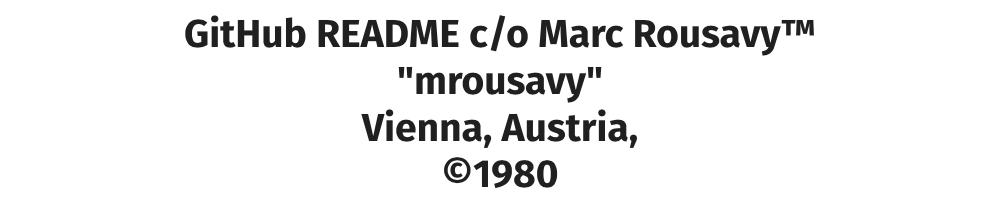
<style>
.page{position:relative;width:1000px;height:200px;background:#ffffff}
.page>*{position:absolute;margin:0}
.t1{font:39px "FiraSans-Bold";color:#202020}
</style>
<div class="page">
<p class="t1" style="left:185px;top:15px;width:629px;height:174px;text-align:center">GitHub README c/o Marc Rousavy™️<br>"mrousavy"<br>Vienna, Austria,<br>©1980</p>
</div>
